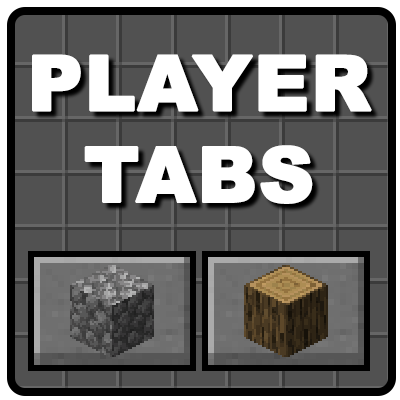
<style>
.page{position:relative;width:400px;height:400px;background:#515151}
.page>*{position:absolute;margin:0}
.t1{font:76.2px "Arial-Black";color:#ffffff;font-weight:bold}
</style>
<div class="page">
<p class="t1" style="left:32px;top:54px;width:340px;height:150px;text-align:center">PLAYER<br>TABS</p>
</div>
